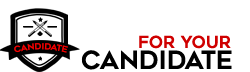
<style>
.page{position:relative;width:250px;height:72px;background:#ffffff}
.page>*{position:absolute;margin:0}
.t1{font:16.7px "Geometos";color:#cf0000}
.t2{font:8.3px "Geometos";color:#f90000}
.t3{font:25px "Geometos";color:#000000}
</style>
<div class="page">
<p class="t1" style="left:139px;top:35px;width:92px;height:14px">For your</p>
<p class="t2" style="left:14px;top:43px;width:54px;height:10px">CANDIDATE</p>
<p class="t3" style="left:81px;top:50px;width:151px;height:20px">candidate</p>
</div>
